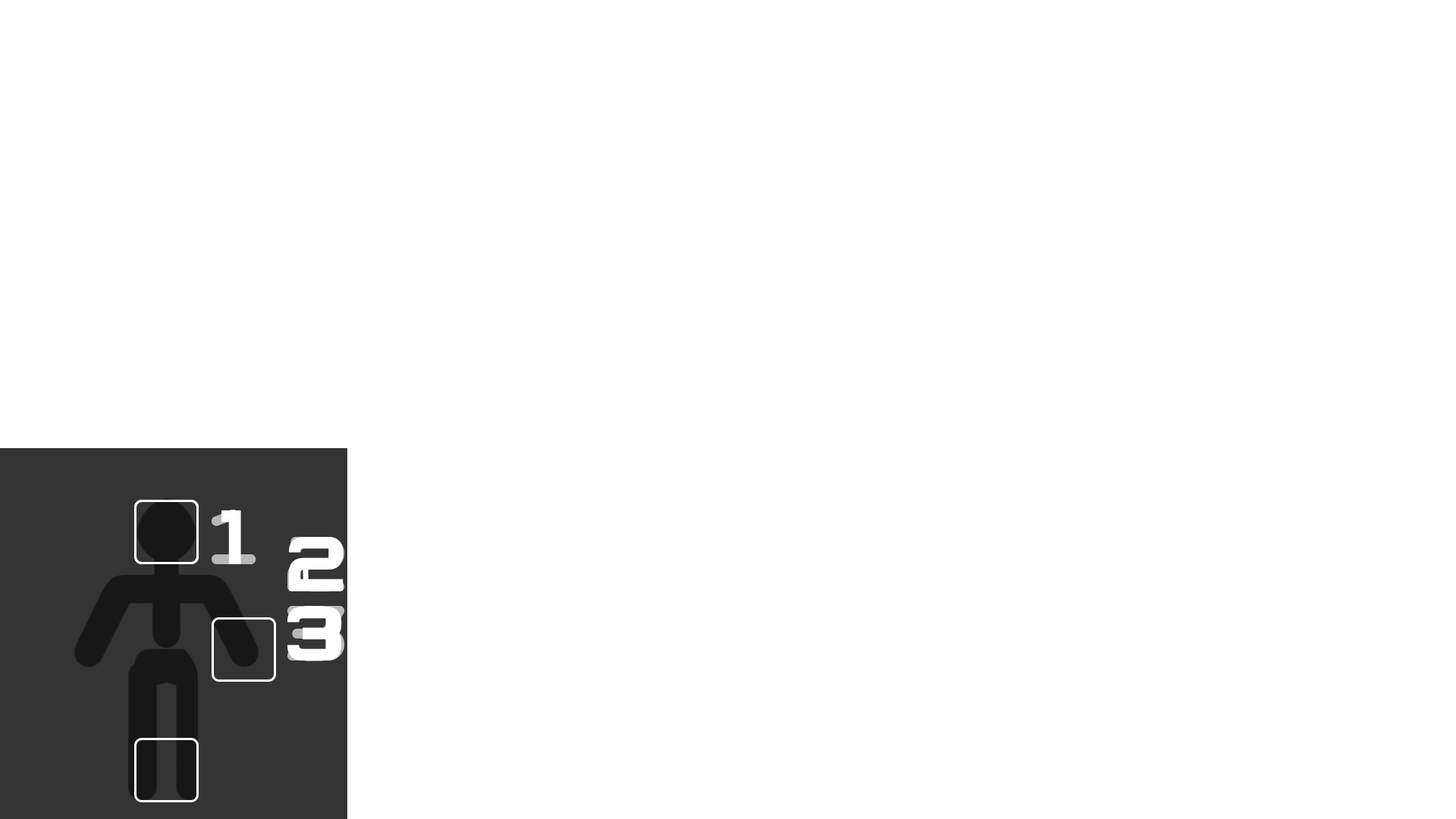
<style>
.page{position:relative;width:1456px;height:819px;background:#ffffff}
.page>*{position:absolute;margin:0}
.t1{font:75.8px "VarinoNormal-Regular";letter-spacing:0.04em}
.t2{font:78.6px "CasanovaScotia";letter-spacing:0.04em;color:#ffffff}
.t3{font:75.8px "VarinoNormal-Regular";letter-spacing:0.04em;color:#ffffff}
.t4{font:108.5px "andromeda";letter-spacing:0.04em;color:#ffffff}
</style>
<div class="page">
<p class="t1" style="left:212px;top:510px;width:44px;height:54px">1</p>
<p class="t2" style="left:221px;top:510px;width:20px;height:54px">1</p>
<p class="t3" style="left:287px;top:537px;width:58px;height:54px">2</p>
<p class="t2" style="left:289px;top:537px;width:55px;height:54px">2</p>
<p class="t4" style="left:302px;top:537px;width:34px;height:54px">2</p>
<p class="t3" style="left:287px;top:606px;width:58px;height:54px">3</p>
<p class="t4" style="left:298px;top:606px;width:33px;height:55px">3</p>
<p class="t2" style="left:287px;top:607px;width:55px;height:53px">3</p>
</div>
